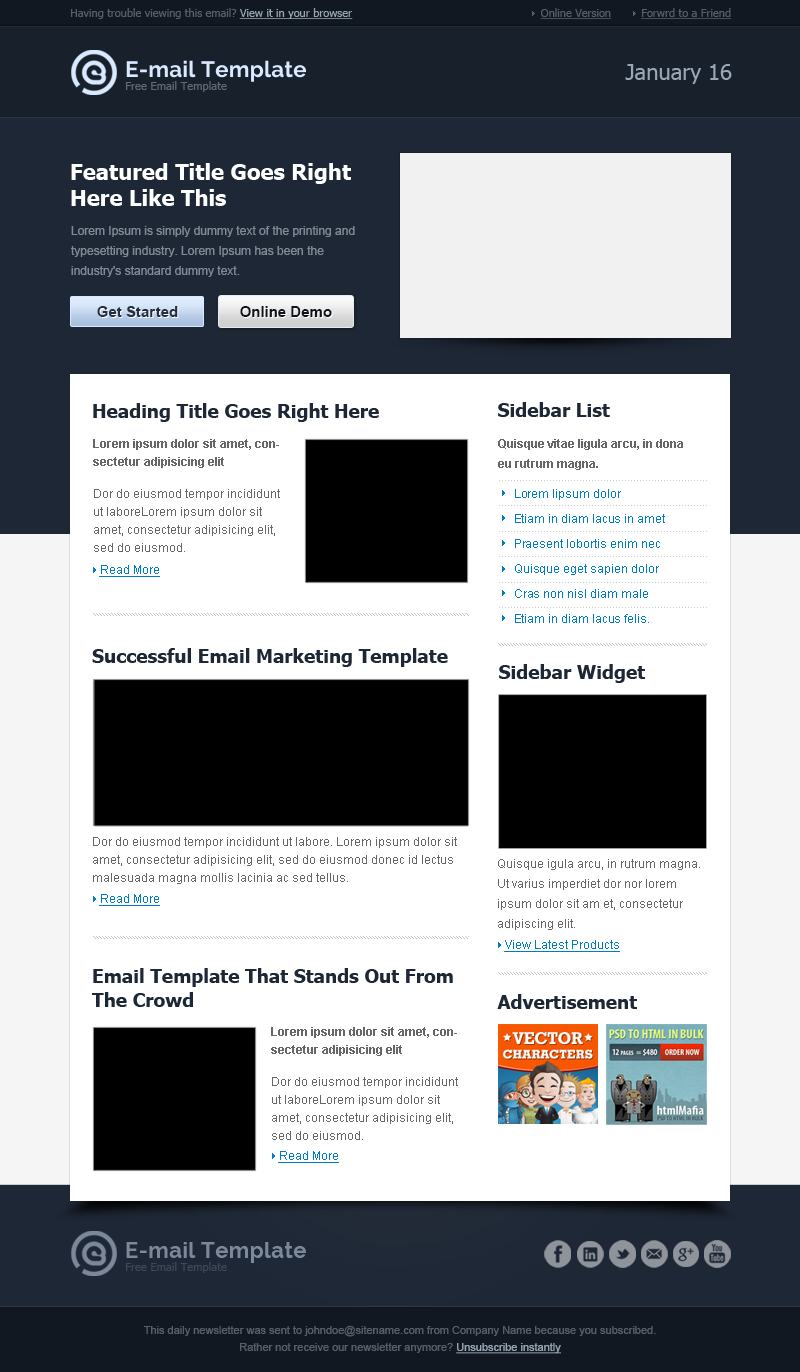
<style>
.page{position:relative;width:800px;height:1372px;background:#ffffff}
.page>*{position:absolute;margin:0}
.t1{font:11px "Tahoma";color:#56606b}
.t2{font:11px "Tahoma";color:#99a7b5;text-decoration:underline}
.t3{font:11px "Tahoma";color:#56606b;text-decoration:underline}
.t4{font:22px "Tahoma";color:#99a6b5}
.t5{font:11px "Tahoma";letter-spacing:0.01em;color:#606b75}
.t6{font:22px/26px "Tahoma-Bold";color:#ffffff}
.t7{font:12px/20px "ArialMT";color:#7e8c95}
.t8{font:15px "Arial-BoldMT";color:#233041}
.t9{font:15px "Arial-BoldMT";color:#0f141c}
.t10{font:19px "Tahoma-Bold";color:#1e2735}
.t11{font:12px/18px "ArialMT";color:#666666}
.t12{font:12px/18px "Arial-BoldMT";color:#666666}
.t13{font:12px/14px "Arial-BoldMT";color:#666666}
.t14{font:12px/14px "ArialMT";color:#666666}
.t15{font:12px/20px "Arial-BoldMT";color:#666666}
.t16{font:12px/25px "ArialMT";color:#007bc5}
.t17{font:12px "ArialMT";color:#007bc5;text-decoration:underline}
.t18{font:12px/20px "ArialMT";color:#666666}
.t19{font:19px/24px "Tahoma-Bold";color:#1e2735}
.t20{font:11px/17px "ArialMT";color:#56606b}
.t21{font:11px/17px "ArialMT";color:#99a7b5;text-decoration:underline}
</style>
<div class="page">
<p class="t1" style="left:71px;top:8px;width:282px;height:11px">Having trouble viewing this email? <span class="t2">View it in your browser</span></p>
<p class="t3" style="left:540px;top:8px;width:72px;height:11px">Online Version</p>
<p class="t3" style="left:641px;top:8px;width:91px;height:11px">Forwrd to a Friend</p>
<p class="t4" style="left:625px;top:64px;width:107px;height:20px">January 16</p>
<p class="t5" style="left:126px;top:81px;width:101px;height:11px">Free Email Template</p>
<p class="t6" style="left:71px;top:163px;width:280px;height:43px">Featured Title Goes Right<br>Here Like This</p>
<p class="t7" style="left:71px;top:226px;width:284px;height:51px">Lorem Ipsum is simply dummy text of the printing and typesetting industry. Lorem Ipsum has been the industry's standard dummy text.</p>
<p class="t8" style="left:97px;top:306px;width:81px;height:11px">Get Started</p>
<p class="t9" style="left:240px;top:306px;width:92px;height:11px">Online Demo</p>
<p class="t10" style="left:93px;top:403px;width:286px;height:19px">Heading Title Goes Right Here</p>
<p class="t10" style="left:498px;top:402px;width:112px;height:15px">Sidebar List</p>
<p class="t11" style="left:93px;top:439px;width:187px;height:113px"><span class="t12">Lorem ipsum dolor sit amet, consectetur adipisicing eli</span><span class="t13">t<br><br></span><span class="t14">Dor do eiusmod tempor incidi</span>dunt ut laboreLorem ipsum dolor sit amet, consectetur adipisicing elit, sed do eiusmod.</p>
<p class="t15" style="left:498px;top:439px;width:185px;height:31px">Quisque vitae ligula arcu, in dona  eu rutrum magna.</p>
<p class="t16" style="left:515px;top:489px;width:150px;height:134px">Lorem lipsum dolor<br>Etiam in diam lacus in amet<br>Praesent lobortis enim nec <br>Quisque eget sapien dolor<br>Cras non nisl diam male<br>Etiam in diam lacus felis.</p>
<p class="t17" style="left:99px;top:565px;width:61px;height:12px">Read More</p>
<p class="t10" style="left:92px;top:648px;width:356px;height:19px">Successful Email Marketing Template</p>
<p class="t10" style="left:499px;top:664px;width:146px;height:19px">Sidebar Widget</p>
<p class="t11" style="left:93px;top:837px;width:364px;height:47px">Dor do eiusmod tempor incididunt ut labore. Lorem ipsum dolor sit amet, consectetur adipisicing elit, sed do eiusmod donec id lectus malesuada magna mollis lacinia ac sed tellus.</p>
<p class="t18" style="left:498px;top:859px;width:202px;height:71px">Quisque igula arcu, in rutrum magna. Ut varius imperdiet dor nor lorem ipsum dolor sit am et, consectetur adipiscing elit.</p>
<p class="t17" style="left:99px;top:894px;width:61px;height:12px">Read More</p>
<p class="t17" style="left:504px;top:940px;width:116px;height:12px">View Latest Products</p>
<p class="t19" style="left:92px;top:968px;width:361px;height:39px">Email Template That Stands Out From<br>The Crowd</p>
<p class="t10" style="left:497px;top:994px;width:140px;height:15px">Advertisement</p>
<p class="t11" style="left:271px;top:1027px;width:187px;height:113px"><span class="t12">Lorem ipsum dolor sit amet, consectetur adipisicing eli</span><span class="t13">t<br><br></span><span class="t14">Dor do eiusmod tempor incidi</span>dunt ut laboreLorem ipsum dolor sit amet, consectetur adipisicing elit, sed do eiusmod.</p>
<p class="t17" style="left:278px;top:1151px;width:61px;height:12px">Read More</p>
<p class="t20" style="left:143px;top:1325px;width:513px;height:29px;text-align:center">This daily newsletter was sent to johndoe@sitename.com from Company Name because you subscribed.<br>Rather not receive our newsletter anymore? <span class="t21">Unsubscribe instantly</span></p>
</div>
